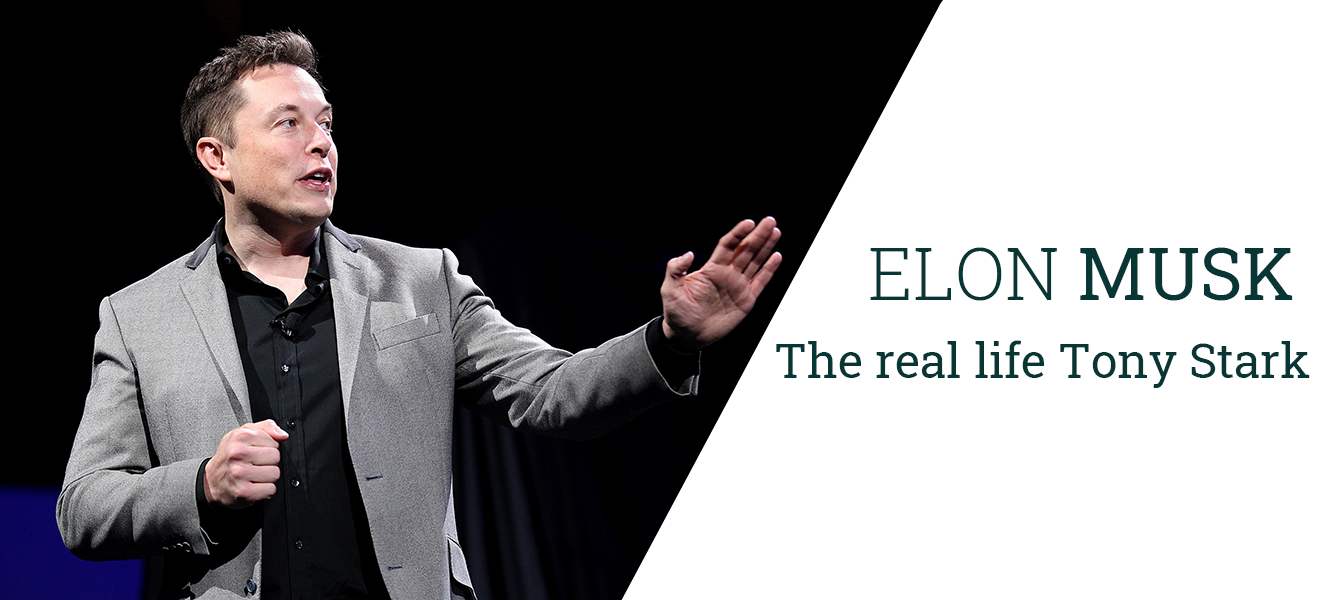
<style>
.page{position:relative;width:1334px;height:600px;background:#ffffff}
.page>*{position:absolute;margin:0}
.t1{font:72px "RobotoSlab-Light";color:#083635}
.t2{font:72px "RobotoSlab-Regular";color:#083635}
.t3{font:48px "RobotoSlab-Regular";color:#083635}
</style>
<div class="page">
<p class="t1" style="left:870px;top:247px;width:423px;height:54px">ELON <span class="t2">MUSK</span></p>
<p class="t3" style="left:776px;top:340px;width:534px;height:48px">The real life Tony Stark</p>
</div>
